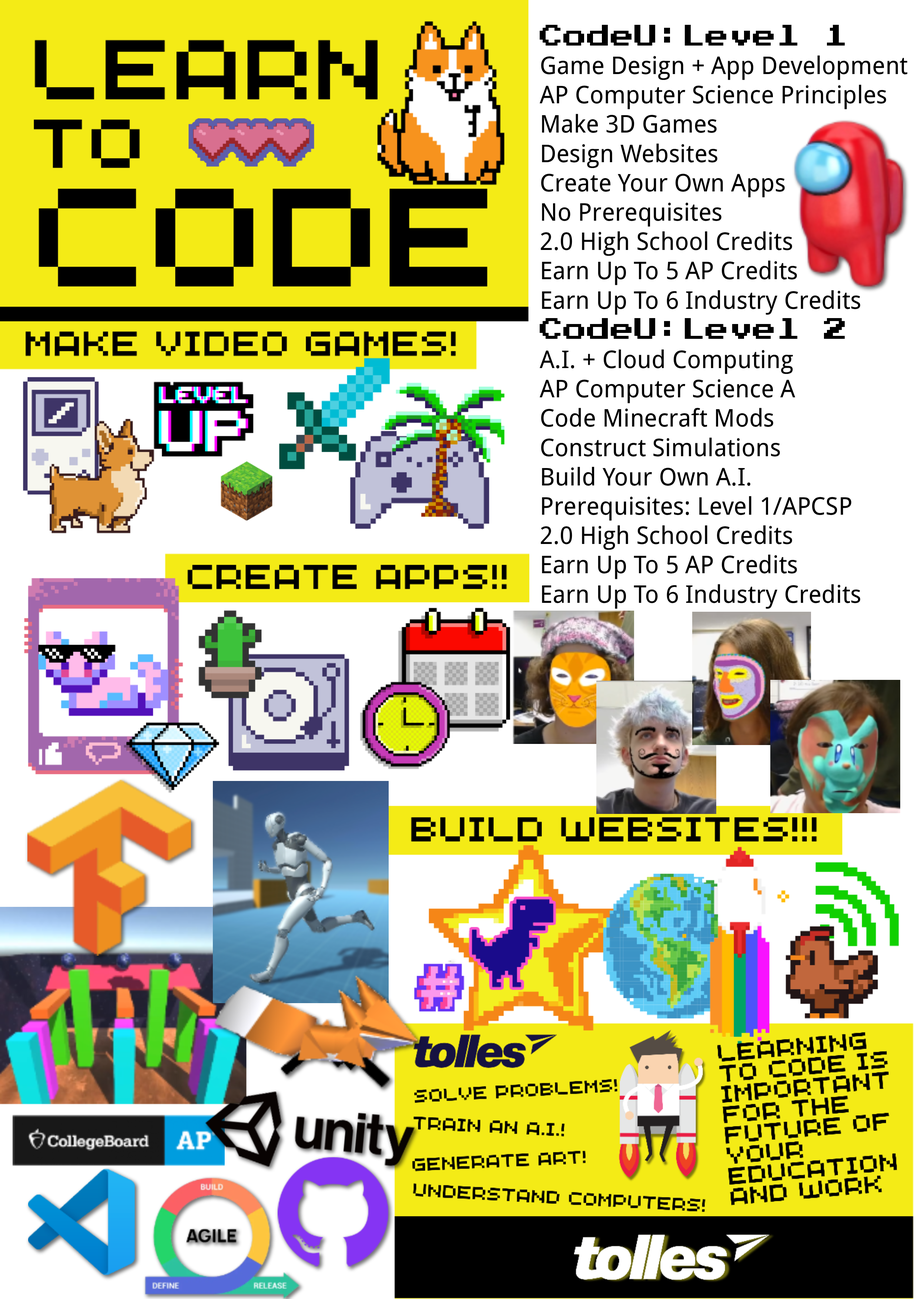
<style>
.page{position:relative;width:918px;height:1299px;background:#ffffff}
.page>*{position:absolute;margin:0}
.t1{font:23.7px "PressStart2P-Regular";color:#000000}
.t2{font:24.4px "DroidSans";color:#000000}
</style>
<div class="page">
<p class="t1" style="left:540px;top:25px;width:305px;height:21px">CodeU:Level 1</p>
<p class="t2" style="left:540px;top:55px;width:368px;height:260px">Game Design + App Development<br>AP Computer Science Principles<br>Make 3D Games<br>Design Websites<br>Create Your Own Apps<br>No Prerequisites<br>2.0 High School Credits<br>Earn Up To 5 AP Credits<br>Earn Up To 6 Industry Credits</p>
<p class="t1" style="left:540px;top:318px;width:305px;height:21px">CodeU:Level 2</p>
<p class="t2" style="left:540px;top:349px;width:320px;height:260px">A.I. + Cloud Computing<br>AP Computer Science A<br>Code Minecraft Mods<br>Construct Simulations<br>Build Your Own A.I.<br>Prerequisites: Level 1/APCSP<br>2.0 High School Credits<br>Earn Up To 5 AP Credits<br>Earn Up To 6 Industry Credits</p>
</div>
